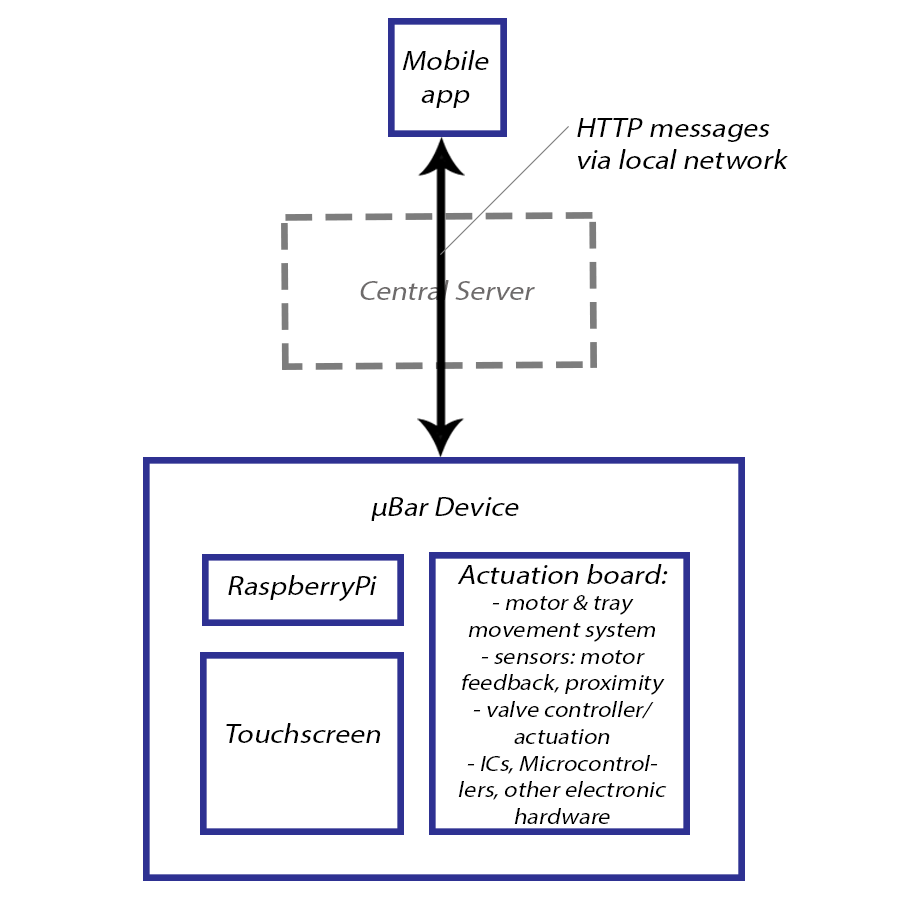
<style>
.page{position:relative;width:900px;height:900px;background:#ffffff}
.page>*{position:absolute;margin:0}
.t1{font:27.2px "MyriadPro-Regular";color:#000000;font-style:italic;scale:1.1 1}
.t2{font:27.2px "MyriadPro-Regular";color:#6e6b6b;font-style:italic;scale:1.1 1}
.t3{font:22.3px "MyriadPro-Regular";color:#000000;font-style:italic;scale:1.1 1}
</style>
<div class="page">
<p class="t1" style="left:402px;top:50px;width:87px;height:58px;text-align:center">Mobile app</p>
<p class="t1" style="left:577px;top:118px;width:211px;height:51px">HTTP messages <br>via local network</p>
<p class="t2" style="left:360px;top:280px;width:175px;height:20px">Central Server</p>
<p class="t1" style="left:371px;top:497px;width:148px;height:24px">µBar Device</p>
<p class="t3" style="left:457px;top:564px;width:211px;height:260px;text-align:center"><span class="t1">Actuation board:<br></span>- motor &amp; tray    movement system<br>- sensors: motor feedback, proximity<br>- valve controller/ actuation<br>- ICs, Microcontrollers, other electronic hardware</p>
<p class="t1" style="left:228px;top:575px;width:149px;height:27px">RaspberryPi</p>
<p class="t1" style="left:226px;top:723px;width:155px;height:20px">Touchscreen</p>
</div>
